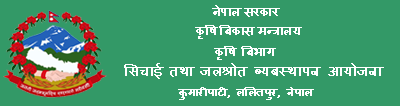
<style>
.page{position:relative;width:400px;height:106px;background:#339967}
.page>*{position:absolute;margin:0}
.t1{font:12px "Mangal";color:#ffffff;font-weight:bold}
.t2{font:14px "Mangal";color:#ffffff;font-weight:bold}
.t3{font:11px "Mangal";color:#ffffff;font-weight:bold}
</style>
<div class="page">
<p class="t1" style="left:212px;top:5px;width:68px;height:12px">नेपाल सरकार</p>
<p class="t1" style="left:195px;top:25px;width:107px;height:14px">कृषि बिकास मन्त्रालय</p>
<p class="t1" style="left:214px;top:46px;width:62px;height:14px">कृषि बिभाग</p>
<p class="t2" style="left:124px;top:63px;width:260px;height:16px">सिचाई तथा जलश्रोत ब्यबस्थापन आयोजना</p>
<p class="t3" style="left:178px;top:87px;width:136px;height:13px">कुमारीपाटी, ललितपुर, नेपाल</p>
</div>
